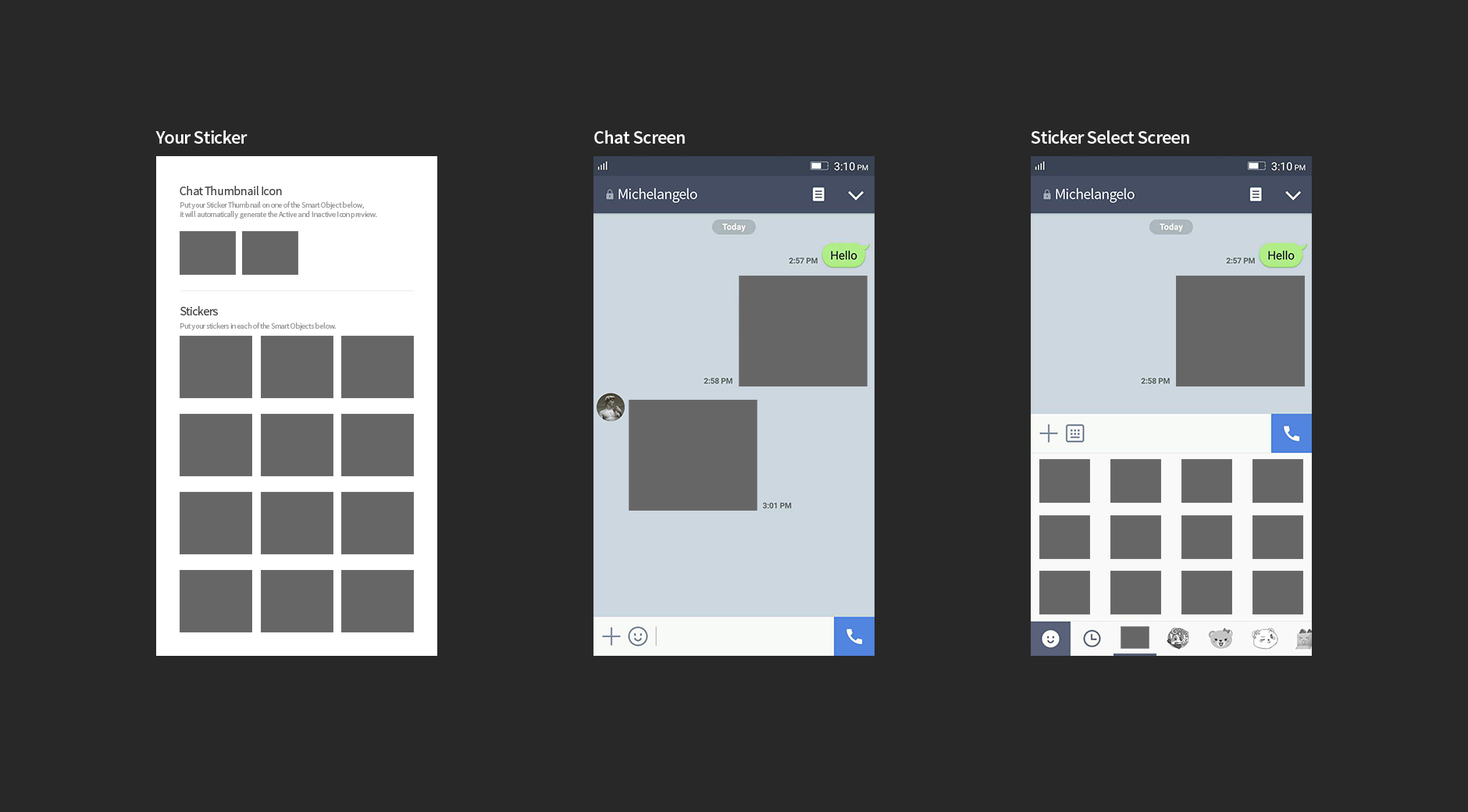
<style>
.page{position:relative;width:1468px;height:812px;background:#282828}
.page>*{position:absolute;margin:0}
.t1{font:18.7px "SourceSansPro-Semibold";letter-spacing:-0.025em;color:#ffffff}
.t2{font:12.5px "SourceSansPro-Regular";letter-spacing:-0.025em;color:#3f3f3f}
.t3{font:7.8px "SourceSansPro-Regular";letter-spacing:-0.025em;color:#9a9a9a}
</style>
<div class="page">
<p class="t1" style="left:155px;top:130px;width:93px;height:14px">Your Sticker</p>
<p class="t1" style="left:594px;top:130px;width:91px;height:14px">Chat Screen</p>
<p class="t1" style="left:1031px;top:130px;width:158px;height:14px">Sticker Select Screen</p>
<p class="t2" style="left:180px;top:186px;width:102px;height:9px">Chat Thumbnail Icon</p>
<p class="t3" style="left:180px;top:201px;width:197px;height:18px">Put your Sticker Thumbnail on one of the Smart Object below, <br>it will automatically generate the Active and Inactive Icon preview.</p>
<p class="t2" style="left:180px;top:306px;width:38px;height:10px">Stickers</p>
<p class="t3" style="left:180px;top:323px;width:156px;height:7px">Put your stickers in each of the Smart Objects below.</p>
</div>
